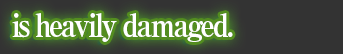
<style>
.page{position:relative;width:343px;height:54px;background:#333333}
.page>*{position:absolute;margin:0}
.t1{font:32px "RyuminPro-ExBold";letter-spacing:-0.09em;color:#ffffff;scale:0.9 1}
.t2{font:37px "RyuminPro-ExBold";letter-spacing:-0.09em;color:#ffffff;scale:0.9 1}
</style>
<div class="page">
<p class="t1" style="left:12px;top:13px;width:221px;height:29px"><span class="t2"> </span>is heavily damaged.</p>
</div>
